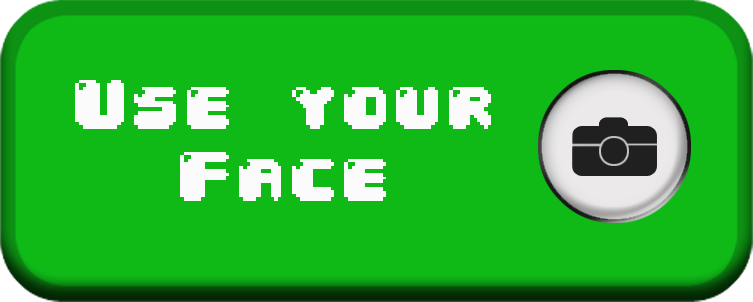
<style>
.page{position:relative;width:753px;height:302px;background:#0fba17}
.page>*{position:absolute;margin:0}
.t1{font:60px "04b30";letter-spacing:0.05em;color:#fbfbfb}
</style>
<div class="page">
<p class="t1" style="left:75px;top:80px;width:416px;height:121px;text-align:center">Use your Face</p>
</div>
